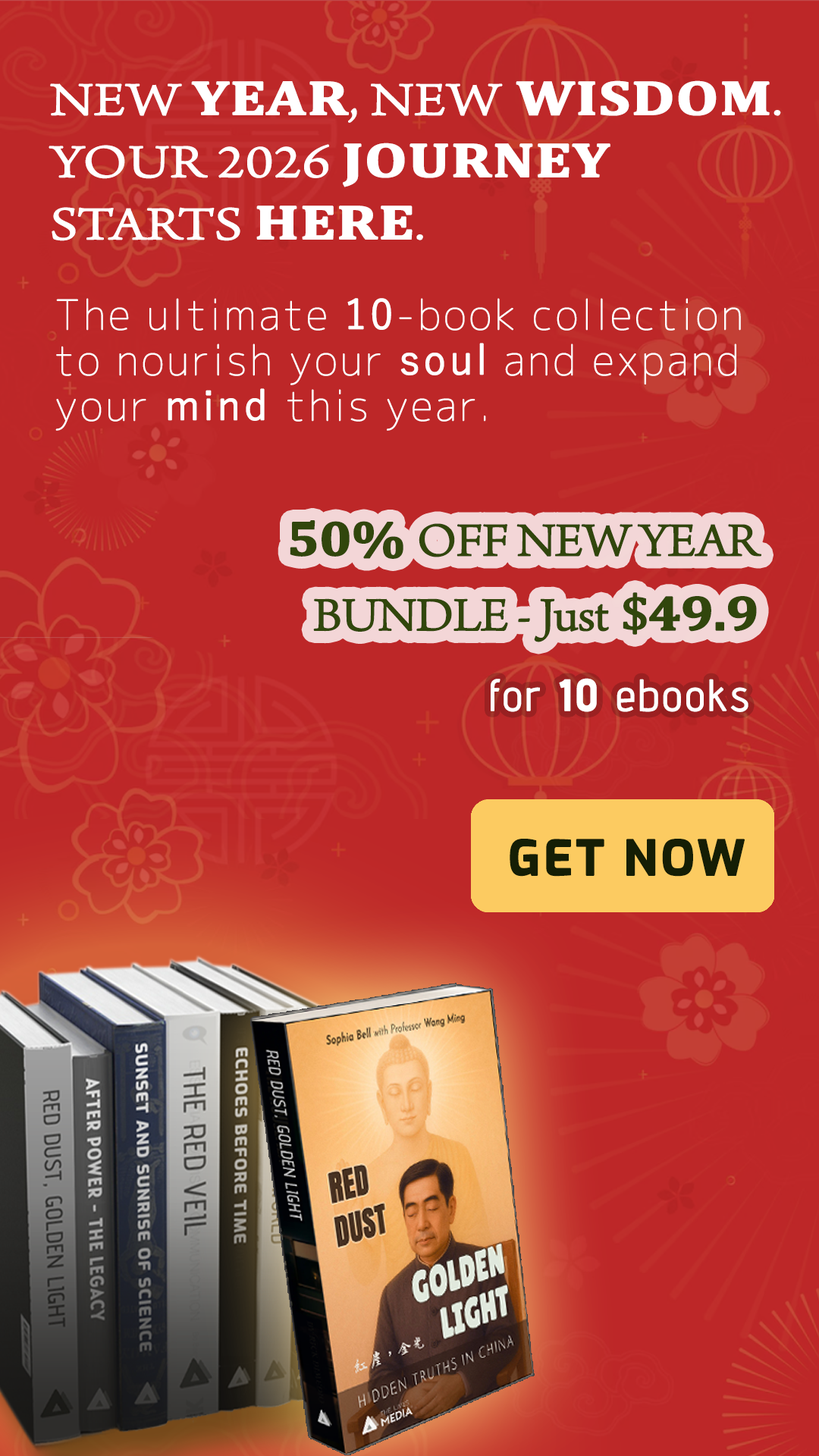
<style>
.page{position:relative;width:819px;height:1456px;background:#bd2728}
.page>*{position:absolute;margin:0}
.t1{font:48.5px/62.2px "ArnoPro-LightDisplay";color:#ffffff;font-weight:bold;scale:1.25 1}
.t2{font:48.5px/62.2px "Cambria-Bold";color:#ffffff;font-weight:bold;scale:1.25 1}
.t3{font:40.9px/45.5px "Chogokuboso-Gothic";letter-spacing:0.05em;color:#ffffff;font-weight:bold}
.t4{font:40.9px/45.5px "YuGothic-Regular";letter-spacing:0.05em;color:#ffffff;font-weight:bold}
.t5{font:49.2px/74.6px "ArnoPro-LightDisplay";letter-spacing:-0.025em;color:#31460c;font-weight:bold;scale:1.11 1}
.t6{font:49.2px/74.6px "Cambria-Bold";letter-spacing:-0.025em;color:#31460c;font-weight:bold;scale:1.11 1}
.t7{font:49.2px/74.6px "Cambria";letter-spacing:-0.025em;color:#31460c;font-weight:bold;scale:1.11 1}
.t8{font:43.7px "AdventPro-Regular";letter-spacing:0.05em;color:#ffffff;font-weight:bold}
.t9{font:43.7px "AdventPro-Bold";letter-spacing:0.05em;color:#ffffff;font-weight:bold}
.t10{font:47.8px "Exo-Bold";letter-spacing:0.05em;color:#151e05;font-weight:bold}
</style>
<div class="page">
<p class="t1" style="left:49px;top:80px;width:732px;height:161px">NEW <span class="t2">YEAR</span>, NEW<span class="t2"> WISDOM</span>. YOUR 2026 <span class="t2">JOURNEY </span>STARTS <span class="t2">HERE</span>.</p>
<p class="t3" style="left:55px;top:298px;width:686px;height:133px">The ultimate <span class="t4">10</span>-book collection to nourish your <span class="t4">soul</span> and expand your <span class="t4">mind </span>this year.</p>
<p class="t5" style="left:290px;top:520px;width:471px;height:122px;text-align:right"><span class="t6">50% </span>OFF NEW YEAR BUNDLE - Just<span class="t7"> $</span><span class="t6">49.9</span></p>
<p class="t8" style="left:491px;top:678px;width:257px;height:34px">for <span class="t9">10</span> ebooks</p>
<p class="t10" style="left:510px;top:839px;width:235px;height:38px">GET NOW</p>
</div>
